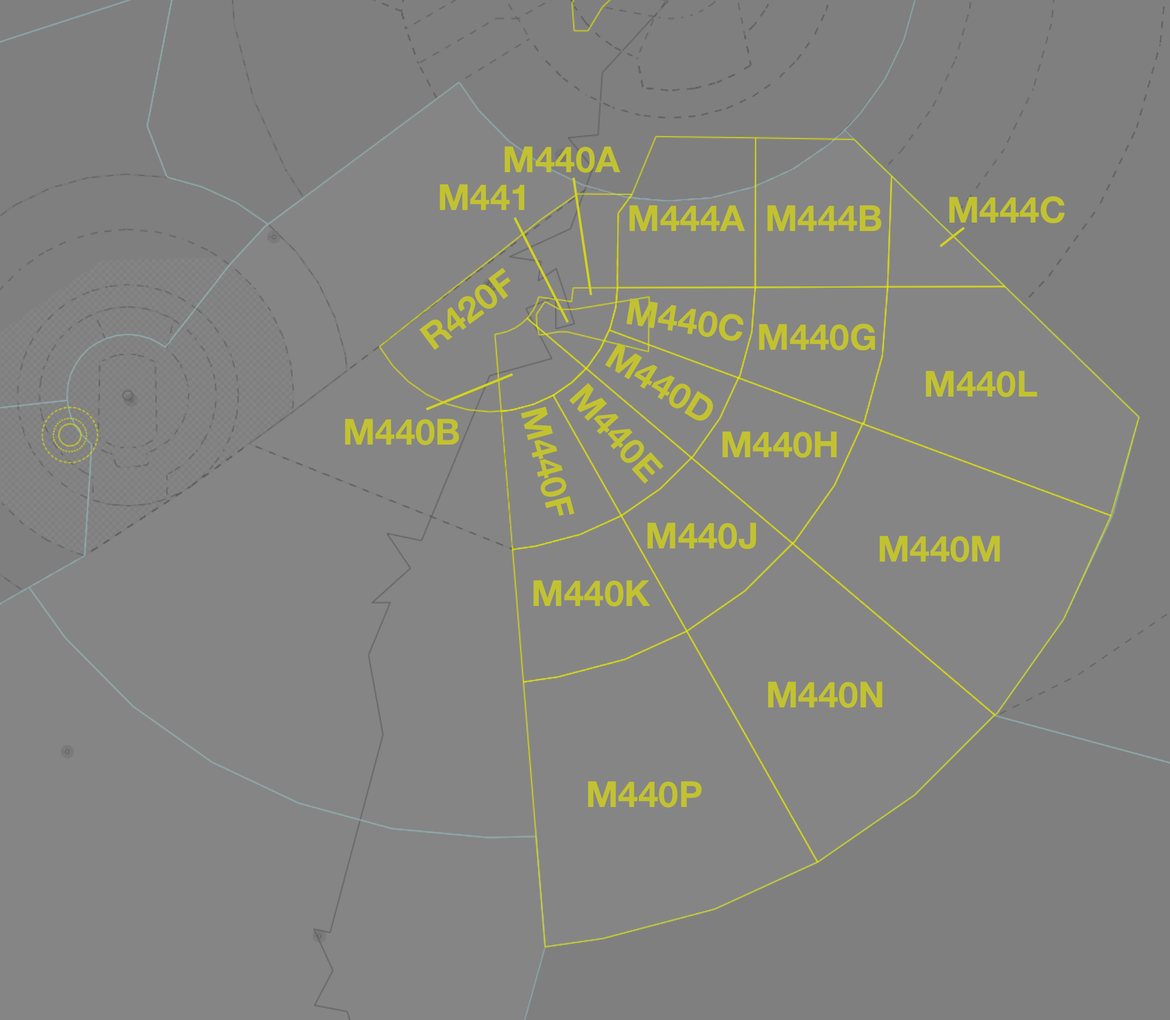
<style>
.page{position:relative;width:1170px;height:1020px;background:#858585}
.page>*{position:absolute;margin:0}
.t1{font:36px "HelveticaNeue-Bold";color:#c2c231}
</style>
<div class="page">
<p class="t1" style="left:504px;top:146px;width:116px;height:27px">M440A</p>
<p class="t1" style="left:440px;top:184px;width:84px;height:26px">M441</p>
<p class="t1" style="left:949px;top:196px;width:116px;height:27px">M444C</p>
<p class="t1" style="left:629px;top:205px;width:116px;height:26px">M444A</p>
<p class="t1" style="left:767px;top:205px;width:114px;height:26px">M444B</p>
<p class="t1" style="left:419px;top:267px;width:91px;height:83px;rotate:-37deg">R420F</p>
<p class="t1" style="left:626px;top:298px;width:117px;height:43px;rotate:9deg">M440C</p>
<p class="t1" style="left:759px;top:323px;width:116px;height:27px">M440G</p>
<p class="t1" style="left:605px;top:342px;width:108px;height:78px;rotate:31deg">M440D</p>
<p class="t1" style="left:925px;top:371px;width:112px;height:26px">M440L</p>
<p class="t1" style="left:569px;top:383px;width:94px;height:101px;rotate:48deg">M440E</p>
<p class="t1" style="left:521px;top:406px;width:54px;height:110px;rotate:75deg">M440F</p>
<p class="t1" style="left:345px;top:419px;width:114px;height:26px">M440B</p>
<p class="t1" style="left:722px;top:431px;width:115px;height:27px">M440H</p>
<p class="t1" style="left:647px;top:522px;width:109px;height:27px">M440J</p>
<p class="t1" style="left:879px;top:536px;width:121px;height:26px">M440M</p>
<p class="t1" style="left:533px;top:580px;width:117px;height:26px">M440K</p>
<p class="t1" style="left:768px;top:681px;width:114px;height:27px">M440N</p>
<p class="t1" style="left:588px;top:781px;width:114px;height:26px">M440P</p>
</div>
